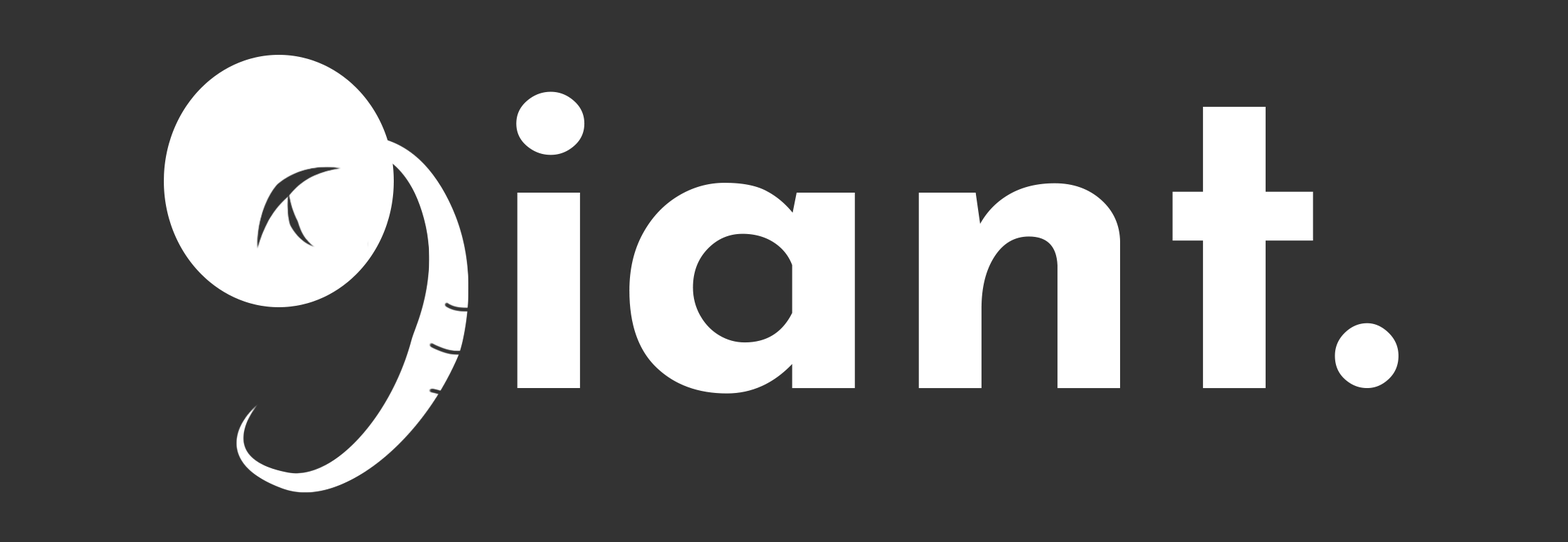
<style>
.page{position:relative;width:1568px;height:542px;background:#333333}
.page>*{position:absolute;margin:0}
.t1{font:447.2px "JosefinSans-Bold";color:#ffffff}
</style>
<div class="page">
<p class="t1" style="left:516px;top:91px;width:883px;height:303px">iant.</p>
</div>
